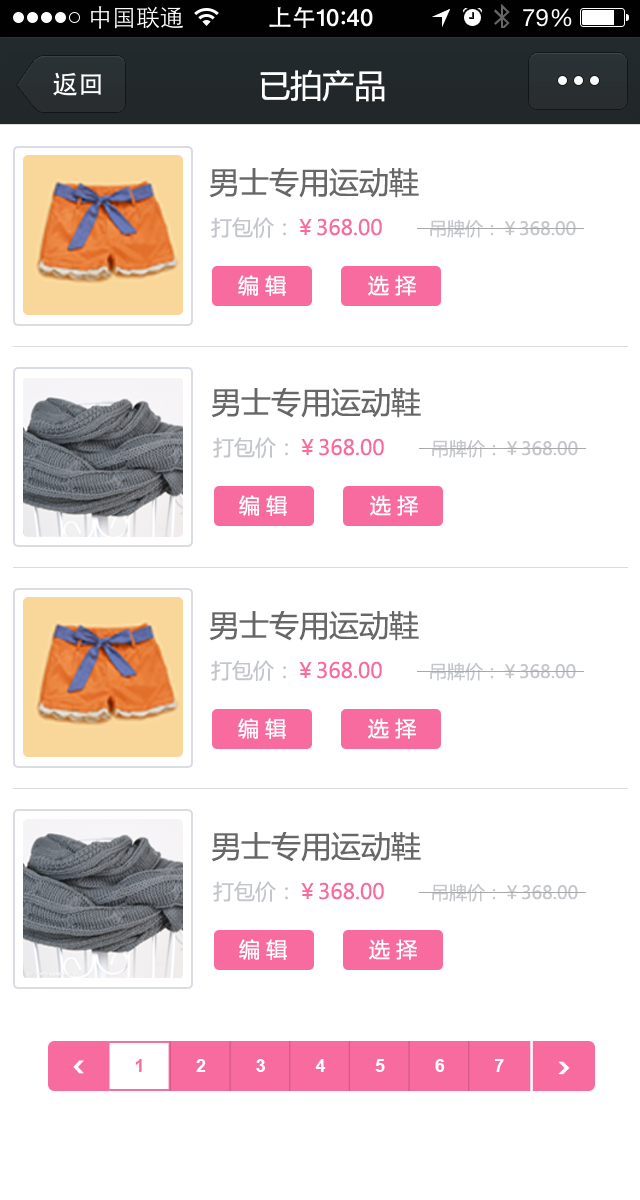
<style>
.page{position:relative;width:640px;height:1200px;background:#ffffff}
.page>*{position:absolute;margin:0}
.t1{font:32px "MicrosoftYaHei";color:#ffffff}
.t2{font:30px "MicrosoftYaHei";color:#676767}
.t3{font:21px "MicrosoftYaHei";color:#f86b9f}
.t4{font:21px "MicrosoftYaHei";color:#c3c6cb}
.t5{font:18px "MicrosoftYaHei";color:#c3c6cb}
.t6{font:21px "MicrosoftYaHei";color:#ffffff}
.t7{font:17.9px "Arial-BoldMT";color:#f86b9f}
.t8{font:17.9px "Arial-BoldMT";color:#ffffff}
</style>
<div class="page">
<p class="t1" style="left:260px;top:70px;width:125px;height:32px">已拍产品</p>
<p class="t2" style="left:209px;top:168px;width:210px;height:30px">男士专用运动鞋</p>
<p class="t3" style="left:211px;top:217px;width:171px;height:21px"><span class="t4">打包价：</span>￥368.00</p>
<p class="t5" style="left:430px;top:219px;width:146px;height:19px">吊牌价：￥368.00</p>
<p class="t6" style="left:238px;top:275px;width:48px;height:21px">编 辑</p>
<p class="t6" style="left:368px;top:275px;width:48px;height:21px">选 择</p>
<p class="t2" style="left:211px;top:388px;width:210px;height:30px">男士专用运动鞋</p>
<p class="t3" style="left:213px;top:437px;width:171px;height:21px"><span class="t4">打包价：</span>￥368.00</p>
<p class="t5" style="left:432px;top:439px;width:146px;height:19px">吊牌价：￥368.00</p>
<p class="t6" style="left:239px;top:495px;width:48px;height:21px">编 辑</p>
<p class="t6" style="left:370px;top:495px;width:48px;height:21px">选 择</p>
<p class="t2" style="left:209px;top:611px;width:210px;height:30px">男士专用运动鞋</p>
<p class="t3" style="left:211px;top:660px;width:171px;height:21px"><span class="t4">打包价：</span>￥368.00</p>
<p class="t5" style="left:430px;top:662px;width:146px;height:19px">吊牌价：￥368.00</p>
<p class="t6" style="left:238px;top:718px;width:48px;height:21px">编 辑</p>
<p class="t6" style="left:368px;top:718px;width:48px;height:21px">选 择</p>
<p class="t2" style="left:211px;top:832px;width:210px;height:30px">男士专用运动鞋</p>
<p class="t3" style="left:213px;top:881px;width:171px;height:21px"><span class="t4">打包价：</span>￥368.00</p>
<p class="t5" style="left:432px;top:883px;width:146px;height:19px">吊牌价：￥368.00</p>
<p class="t6" style="left:239px;top:939px;width:48px;height:21px">编 辑</p>
<p class="t6" style="left:369px;top:939px;width:48px;height:21px">选 择</p>
<p class="t7" style="left:135px;top:1059px;width:7px;height:13px">1</p>
<p class="t8" style="left:196px;top:1059px;width:10px;height:13px">2</p>
<p class="t8" style="left:256px;top:1059px;width:9px;height:13px">3</p>
<p class="t8" style="left:315px;top:1059px;width:11px;height:13px">4</p>
<p class="t8" style="left:375px;top:1059px;width:10px;height:13px">5</p>
<p class="t8" style="left:435px;top:1059px;width:10px;height:13px">6</p>
<p class="t8" style="left:495px;top:1059px;width:9px;height:13px">7</p>
</div>
